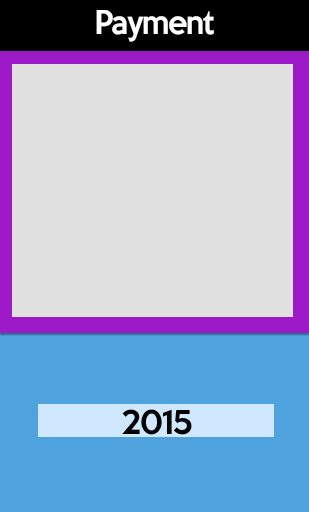
<style>
.page{position:relative;width:309px;height:512px;background:#e1e1e1}
.page>*{position:absolute;margin:0}
.t1{font:30px "KeepCalm-Medium";letter-spacing:-0.05em;color:#ffffff;scale:0.95 1}
.t2{font:30px "KeepCalm-Medium";letter-spacing:-0.05em;color:#000000}
</style>
<div class="page">
<p class="t1" style="left:96px;top:10px;width:118px;height:32px">Payment</p>
<p class="t2" style="left:122px;top:409px;width:70px;height:26px">2015</p>
</div>
